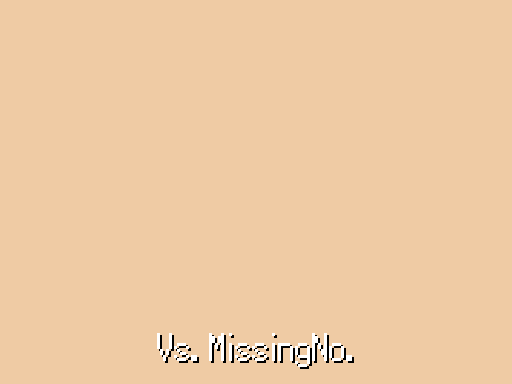
<style>
.page{position:relative;width:512px;height:384px;background:#efcba4}
.page>*{position:absolute;margin:0}
.t1{font:40px "Power-Green";color:#ffffff;scale:0.96 1}
.t2{font:40px "Power-Green";color:#000000;scale:0.96 1}
</style>
<div class="page">
<p class="t1" style="left:157px;top:333px;width:195px;height:34px">Vs. MissingNo.</p>
<p class="t2" style="left:159px;top:335px;width:195px;height:34px">Vs. MissingNo.</p>
</div>
